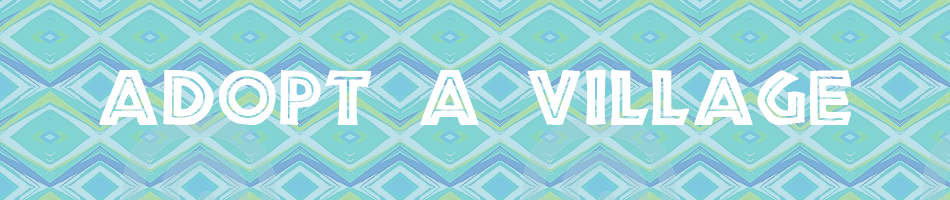
<style>
.page{position:relative;width:950px;height:200px}
.page>*{position:absolute;margin:0}
.t1{font:72px "African";color:#ffffff}
</style>
<div class="page">
<p class="t1" style="left:99px;top:70px;width:753px;height:55px">adopt a village</p>
</div>
